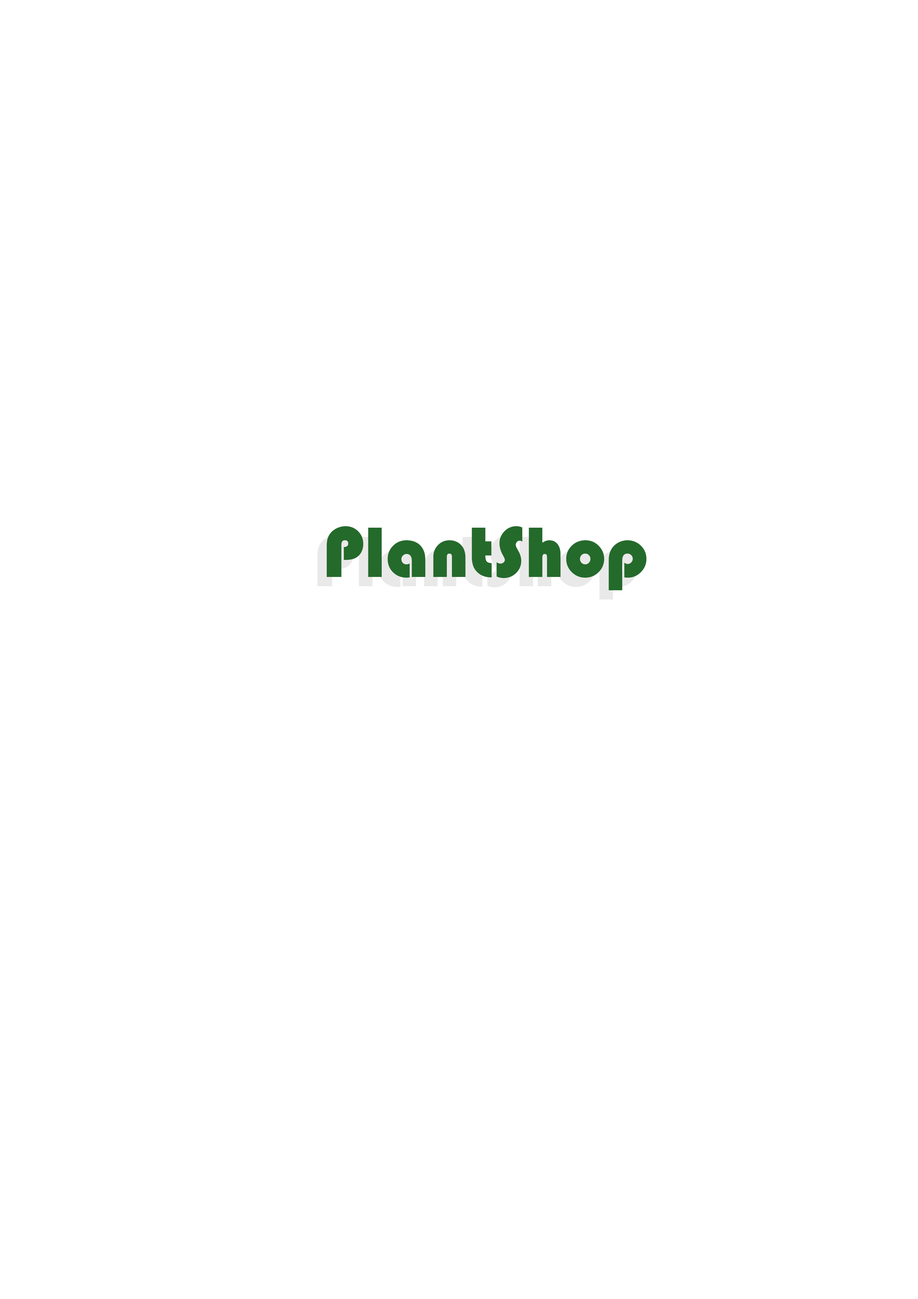
<style>
.page{position:relative;width:918px;height:1299px;background:#ffffff}
.page>*{position:absolute;margin:0}
.t1{font:74px "Bauhaus93";color:#246a2b}
</style>
<div class="page">
<p class="t1" style="left:327px;top:526px;width:320px;height:64px">PlantShop</p>
</div>
